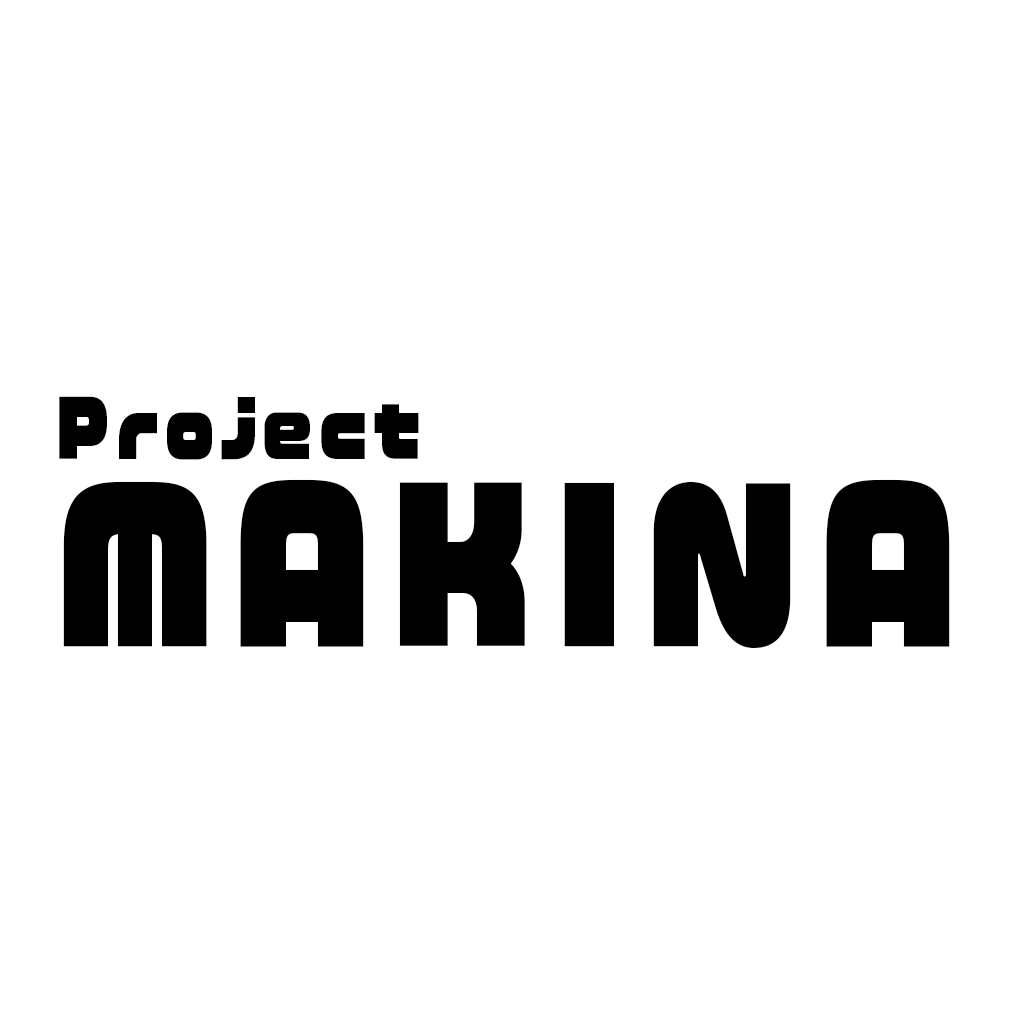
<style>
.page{position:relative;width:1024px;height:1024px;background:#ffffff}
.page>*{position:absolute;margin:0}
.t1{font:76px "VDL-LogoJrBlack-Black";letter-spacing:0.1em;color:#000000;scale:0.79 1}
.t2{font:200px "VDL-LogoJrBlack-Black";letter-spacing:0.1em;color:#000000;scale:0.8 1}
</style>
<div class="page">
<p class="t1" style="left:59px;top:396px;width:360px;height:64px">Project</p>
<p class="t2" style="left:63px;top:479px;width:887px;height:170px">MAKINA</p>
</div>
